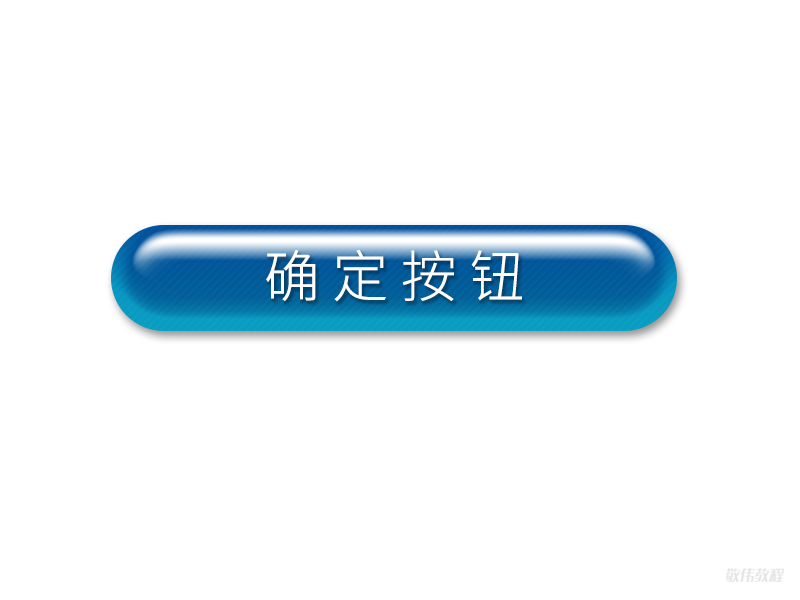
<style>
.page{position:relative;width:800px;height:600px;background:#ffffff}
.page>*{position:absolute;margin:0}
.t1{font:55.7px "SourceHanSansCN-Light";letter-spacing:0.2em;color:#ffffff;font-weight:bold}
</style>
<div class="page">
<p class="t1" style="left:266px;top:249px;width:256px;height:53px">确定按钮</p>
</div>
